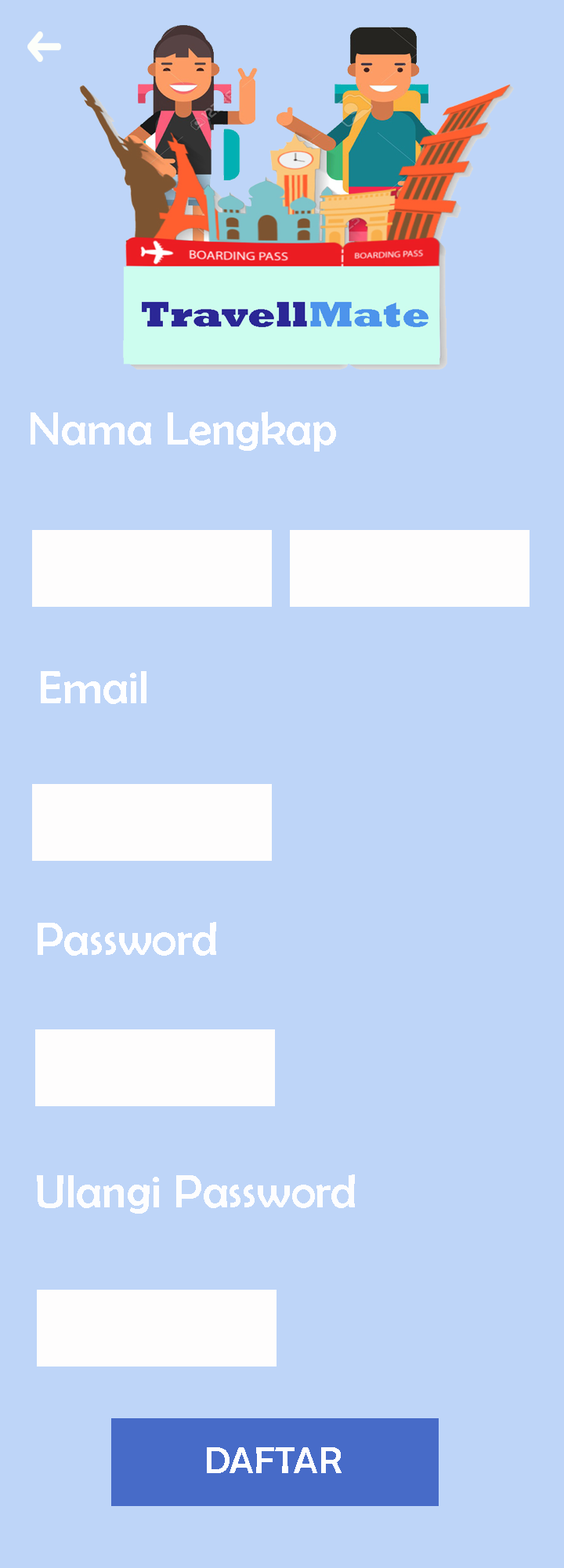
<style>
.page{position:relative;width:564px;height:1568px;background:#bed5f8}
.page>*{position:absolute;margin:0}
.t1{font:47px "BerlinSansFB-Reg";color:#fefeff}
.t2{font:47px "BerlinSansFB-Reg";color:#fdfdfe}
.t3{font:37.6px "BerlinSansFB-Reg";color:#fdfdfe}
</style>
<div class="page">
<p class="t1" style="left:31px;top:412px;width:305px;height:40px">Nama Lengkap</p>
<p class="t1" style="left:41px;top:671px;width:106px;height:33px">Email</p>
<p class="t1" style="left:38px;top:922px;width:178px;height:34px">Password</p>
<p class="t2" style="left:37px;top:1174px;width:318px;height:40px">Ulangi Password</p>
<p class="t3" style="left:207px;top:1447px;width:135px;height:26px">DAFTAR</p>
</div>
